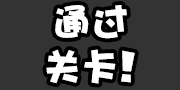
<style>
.page{position:relative;width:180px;height:90px;background:#333333}
.page>*{position:absolute;margin:0}
.t1{font:37.3px "DFPHaiBaoW12";color:#ffffff}
.t2{font:37.3px "DFPHaiBaoW12";letter-spacing:0.05em;color:#ffffff}
.t3{font:37.3px "MARIOFontv3_1-Solid";color:#ffffff}
</style>
<div class="page">
<p class="t1" style="left:46px;top:5px;width:89px;height:79px;text-align:center"><span class="t2">通</span>过<br>关<span class="t2">卡</span><span class="t3">！</span></p>
</div>
